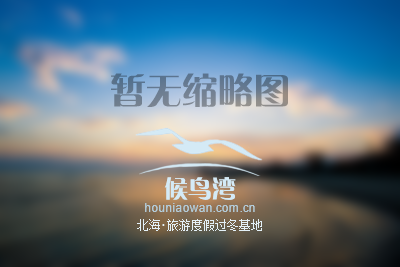
<style>
.page{position:relative;width:400px;height:267px}
.page>*{position:absolute;margin:0}
.t1{font:36px "FZCQJW--GB1-0";color:#6c7d90}
.t2{font:24px "FZCQJW--GB1-0";color:#d4eaf6}
.t3{font:12px "ArialMT";color:#b3ccda}
.t4{font:12px "SimSun";color:#e4f1f8}
.t5{font:14px "MicrosoftYaHei";color:#e4f1f8}
</style>
<div class="page">
<p class="t1" style="left:111px;top:73px;width:177px;height:34px">暂无缩略图</p>
<p class="t2" style="left:164px;top:177px;width:72px;height:23px">候鸟湾</p>
<p class="t3" style="left:145px;top:203px;width:110px;height:9px">houniaowan.com.cn</p>
<p class="t4" style="left:137px;top:219px;width:23px;height:12px">北海</p>
<p class="t4" style="left:167px;top:219px;width:95px;height:12px">旅游度假过冬基地</p>
<p class="t5" style="left:162px;top:224px;width:3px;height:2px">.</p>
</div>
